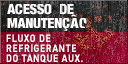
<style>
.page{position:relative;width:128px;height:64px}
.page>*{position:absolute;margin:0}
.t1{font:11px/10px "DINNextLTPro-Bold";letter-spacing:0.06em;color:#ffffff;text-transform:uppercase;scale:0.85 1}
</style>
<div class="page">
<p class="t1" style="left:6px;top:34px;width:77px;height:29px">FLUXO DE <br>REFRIGERANTE<br>DO TANQUE AUX.</p>
</div>
